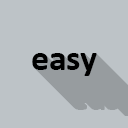
<style>
.page{position:relative;width:128px;height:128px;background:#bdc3c7}
.page>*{position:absolute;margin:0}
.t1{font:36px "Calibri-Bold";letter-spacing:-0.01em;color:#000000}
</style>
<div class="page">
<p class="t1" style="left:32px;top:53px;width:65px;height:23px">easy</p>
</div>
